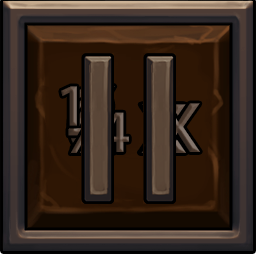
<style>
.page{position:relative;width:256px;height:256px}
.page>*{position:absolute;margin:0}
.t1{font:100px "MyriadPro-Regular"}
</style>
<div class="page">
<p class="t1" style="left:61px;top:86px;width:139px;height:68px">¼ x</p>
</div>
